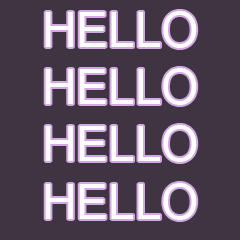
<style>
.page{position:relative;width:240px;height:240px;background:#3f3442}
.page>*{position:absolute;margin:0}
.t1{font:47.7px "ArialMT";color:#ffffff}
</style>
<div class="page">
<p class="t1" style="left:45px;top:11px;width:152px;height:209px">HELLO<br>HELLO<br>HELLO<br>HELLO</p>
</div>
